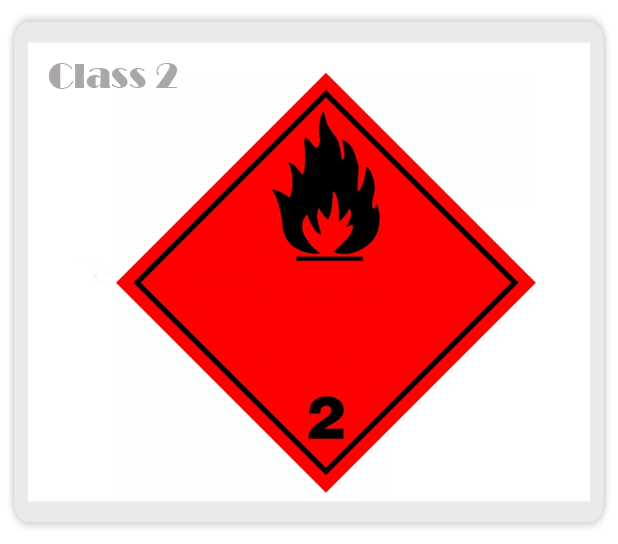
<style>
.page{position:relative;width:618px;height:544px;background:#ffffff}
.page>*{position:absolute;margin:0}
.t1{font:36px "Broadway";color:#aca7a7}
</style>
<div class="page">
<p class="t1" style="left:49px;top:63px;width:129px;height:26px">Class 2</p>
</div>
